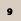
<style>
.page{position:relative;width:21px;height:21px;background:#d9cdc1}
.page>*{position:absolute;margin:0}
.t1{font:9px "Tahoma-Bold";color:#000000}
</style>
<div class="page">
<p class="t1" style="left:7px;top:8px;width:6px;height:7px">9</p>
</div>
